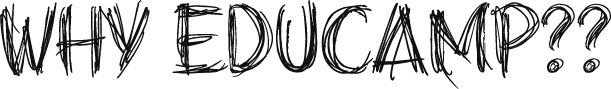
<style>
.page{position:relative;width:611px;height:89px;background:#ffffff}
.page>*{position:absolute;margin:0}
.t1{font:72px "goaroundthebooks";color:#101011}
</style>
<div class="page">
<p class="t1" style="left:0px;top:0px;width:611px;height:89px">why educamp??</p>
</div>
